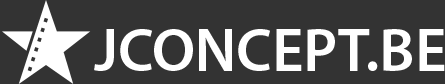
<style>
.page{position:relative;width:445px;height:84px;background:#333333}
.page>*{position:absolute;margin:0}
.t1{font:61px "MyriadPro-Semibold";color:#ffffff}
</style>
<div class="page">
<p class="t1" style="left:94px;top:29px;width:351px;height:42px">JCONCEPT.BE</p>
</div>
